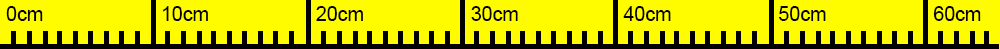
<style>
.page{position:relative;width:1000px;height:49px;background:#fffc00}
.page>*{position:absolute;margin:0}
.t1{font:19.6px "ArialMT";color:#000000}
</style>
<div class="page">
<p class="t1" style="left:6px;top:6px;width:975px;height:15px">0cm     10cm       20cm         30cm     40cm      50cm        60cm</p>
</div>
